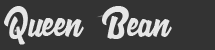
<style>
.page{position:relative;width:215px;height:50px;background:#333333}
.page>*{position:absolute;margin:0}
.t1{font:42px "LoguetownDemo";color:#e6e6e6}
</style>
<div class="page">
<p class="t1" style="left:4px;top:6px;width:168px;height:39px">Queen Bean</p>
</div>
